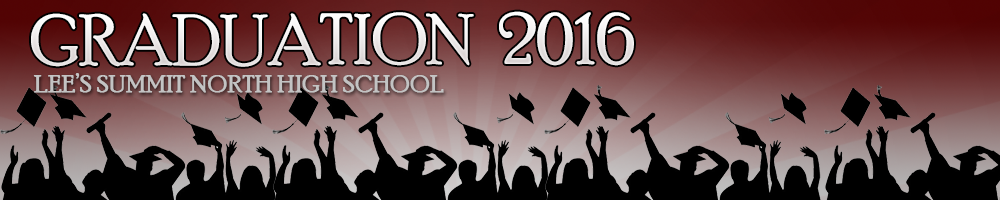
<style>
.page{position:relative;width:1000px;height:200px;background:#000000}
.page>*{position:absolute;margin:0}
.t1{font:72px "PoorRichard-Regular";color:#f0eeee}
.t2{font:25.2px "PoorRichard-Regular";color:#c3c3c3;text-transform:uppercase;font-weight:bold}
</style>
<div class="page">
<p class="t1" style="left:31px;top:11px;width:603px;height:56px">GRADUATION  2016</p>
<p class="t2" style="left:33px;top:73px;width:411px;height:20px">Lee’s Summit North High School</p>
</div>
